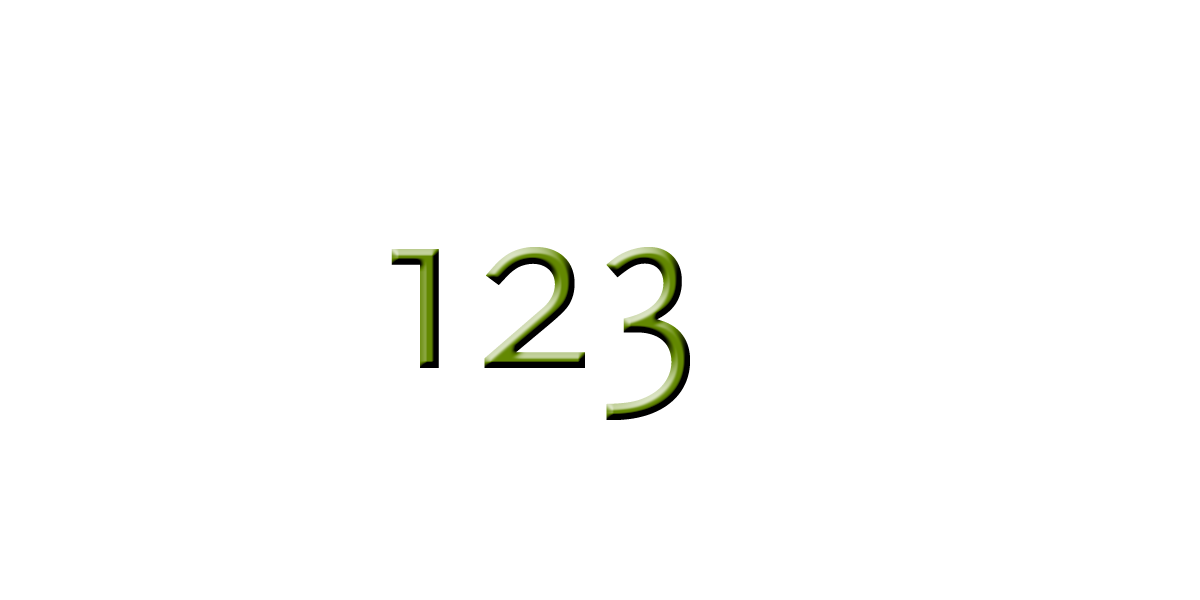
<style>
.page{position:relative;width:1200px;height:600px;background:#ffffff}
.page>*{position:absolute;margin:0}
.t1{font:250px "ScalaSansOT-Regular"}
</style>
<div class="page">
<p class="t1" style="left:391px;top:247px;width:299px;height:173px">123</p>
</div>
